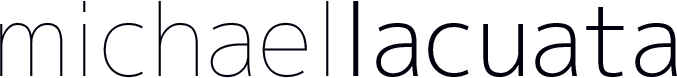
<style>
.page{position:relative;width:677px;height:78px;background:#ffffff}
.page>*{position:absolute;margin:0}
.t1{font:100px "mplus-1p-thin";color:#01010d}
.t2{font:100px "mplus-1p-light";color:#01010d}
</style>
<div class="page">
<p class="t1" style="left:0px;top:0px;width:677px;height:78px">michael<span class="t2">lacuata</span></p>
</div>
